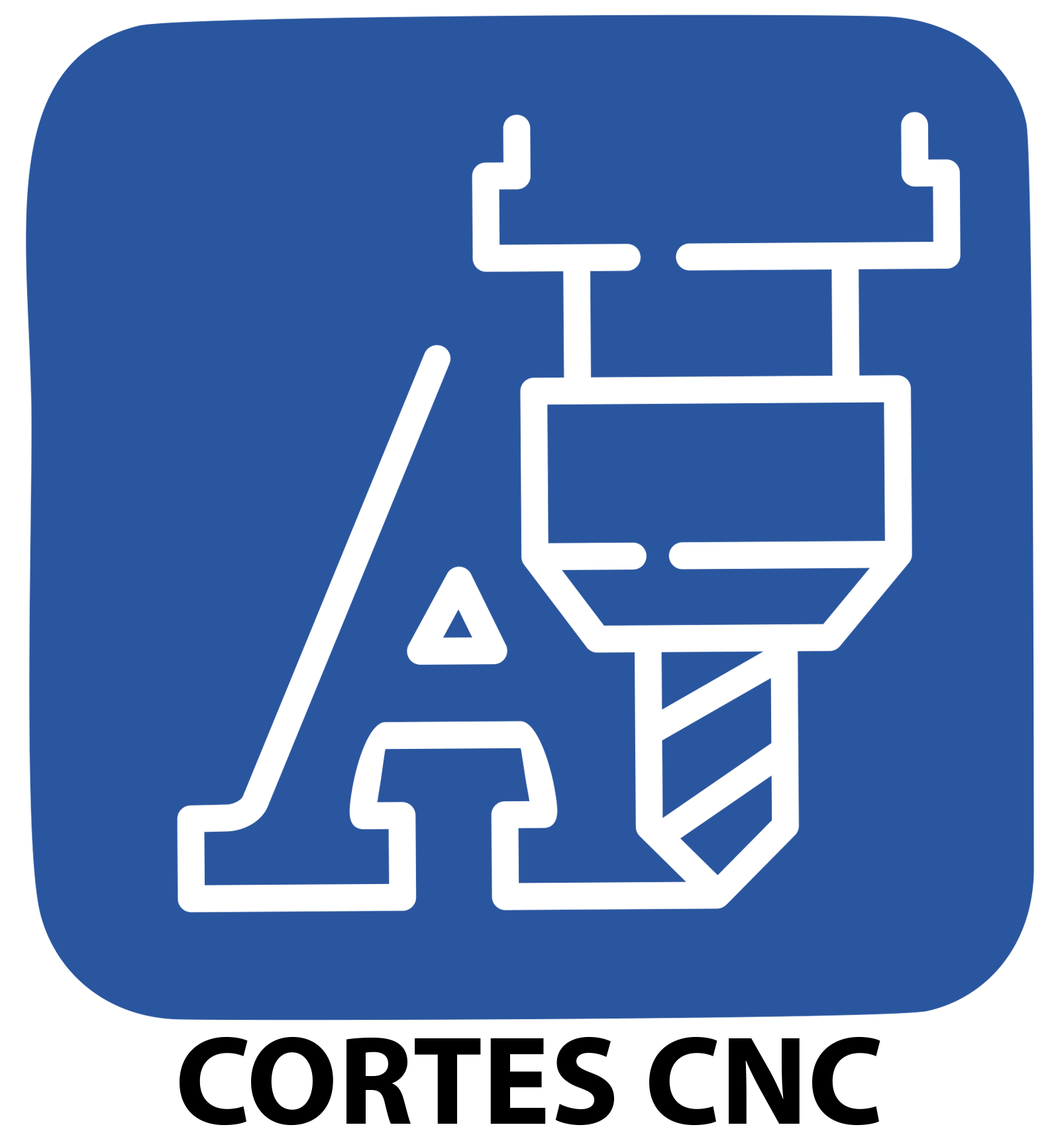
<style>
.page{position:relative;width:1052px;height:1133px;background:#2a569f}
.page>*{position:absolute;margin:0}
.t1{font:127px "MyriadPro-Bold";color:#000000}
</style>
<div class="page">
<p class="t1" style="left:180px;top:1037px;width:700px;height:89px">CORTES CNC</p>
</div>
